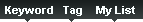
<style>
.page{position:relative;width:143px;height:22px}
.page>*{position:absolute;margin:0}
.t1{font:11px "Arial-BoldMT";color:#f9ffff}
</style>
<div class="page">
<p class="t1" style="left:5px;top:6px;width:48px;height:10px">Keyword</p>
<p class="t1" style="left:63px;top:6px;width:19px;height:10px">Tag</p>
<p class="t1" style="left:96px;top:6px;width:39px;height:10px">My List</p>
</div>
